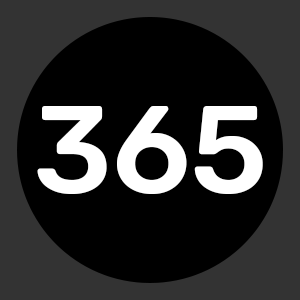
<style>
.page{position:relative;width:300px;height:300px;background:#000000}
.page>*{position:absolute;margin:0}
.t1{font:125px "Rubik-Medium";color:#ffffff}
</style>
<div class="page">
<p class="t1" style="left:37px;top:106px;width:226px;height:88px">365</p>
</div>
